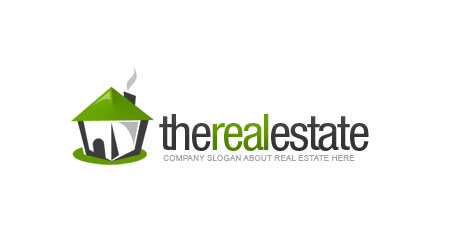
<style>
.page{position:relative;width:450px;height:250px;background:#ffffff}
.page>*{position:absolute;margin:0}
.t1{font:50px "HelveticaNeueLTStd-Cn";letter-spacing:-0.05em;color:#3c3c3c}
.t2{font:50px "HelveticaNeueLTStd-Cn";letter-spacing:-0.05em;color:#609900}
.t3{font:8.3px "ArialMT";color:#a3a3a3}
</style>
<div class="page">
<p class="t1" style="left:159px;top:114px;width:210px;height:37px">the<span class="t2">real</span>estate</p>
<p class="t3" style="left:163px;top:155px;width:192px;height:6px">COMPANY SLOGAN ABOUT REAL ESTATE HERE</p>
</div>
